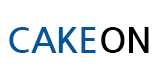
<style>
.page{position:relative;width:160px;height:80px;background:#ffffff}
.page>*{position:absolute;margin:0}
.t1{font:35px "NanumGothicBold";color:#01579a}
.t2{font:35px "NanumGothicBold";color:#000000}
</style>
<div class="page">
<p class="t1" style="left:9px;top:27px;width:140px;height:26px">CAKE<span class="t2">ON</span></p>
</div>
